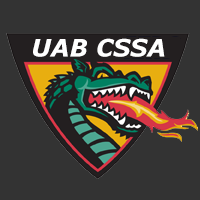
<style>
.page{position:relative;width:200px;height:200px;background:#333333}
.page>*{position:absolute;margin:0}
.t1{font:24px "Verdana-BoldItalic";color:#ffffff}
</style>
<div class="page">
<p class="t1" style="left:33px;top:38px;width:132px;height:19px">UAB CSSA</p>
</div>
